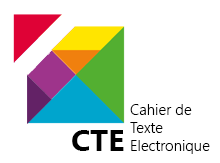
<style>
.page{position:relative;width:220px;height:163px;background:#ffffff}
.page>*{position:absolute;margin:0}
.t1{font:15px "LeelawadeeUI-Semilight";color:#000000}
.t2{font:30px "LeelawadeeUI-Bold";color:#000000}
</style>
<div class="page">
<p class="t1" style="left:130px;top:104px;width:80px;height:50px">Cahier de<br>Texte<br>Electronique</p>
<p class="t2" style="left:72px;top:130px;width:52px;height:21px">CTE</p>
</div>
